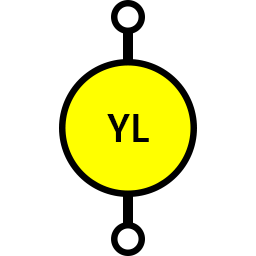
<style>
.page{position:relative;width:256px;height:256px;background:#ffffff}
.page>*{position:absolute;margin:0}
.t1{font:37.5px "MalgunGothicBold";color:#000000}
</style>
<div class="page">
<p class="t1" style="left:107px;top:114px;width:42px;height:28px">YL</p>
</div>
